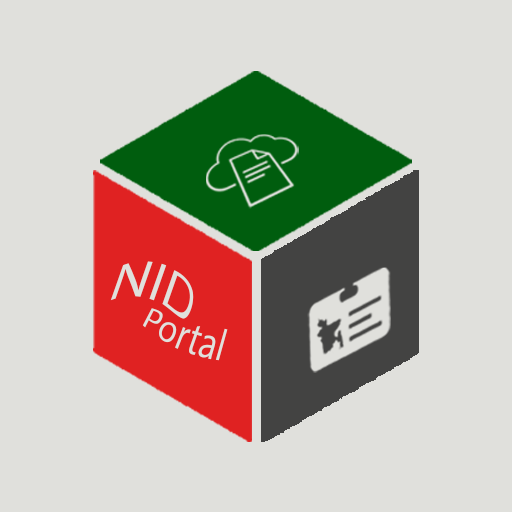
<style>
.page{position:relative;width:512px;height:512px;background:#e0e0dc}
.page>*{position:absolute;margin:0}
.t1{font:54.6px "MyriadPro-Regular";color:#e0e0dc}
.t2{font:35.2px "MyriadPro-Regular";color:#e0e0dc}
</style>
<div class="page">
<p class="t1" style="left:110px;top:261px;width:84px;height:58px;rotate:19deg">NID</p>
<p class="t2" style="left:142px;top:308px;width:86px;height:53px;rotate:22deg">Portal</p>
</div>
